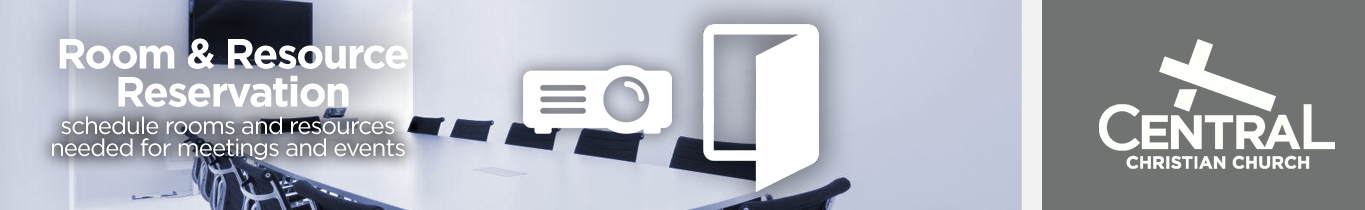
<style>
.page{position:relative;width:1365px;height:210px;background:#707372}
.page>*{position:absolute;margin:0}
.t1{font:42px/38px "Gotham-Bold";letter-spacing:-0.04em;color:#ffffff}
.t2{font:24px/22px "Gotham-Book";letter-spacing:-0.04em;color:#ffffff}
</style>
<div class="page">
<p class="t1" style="left:59px;top:38px;width:349px;height:69px;text-align:center">Room &amp; Resource<br>Reservation</p>
<p class="t2" style="left:52px;top:116px;width:353px;height:44px;text-align:center">schedule rooms and resources<br>needed for meetings and events</p>
</div>
